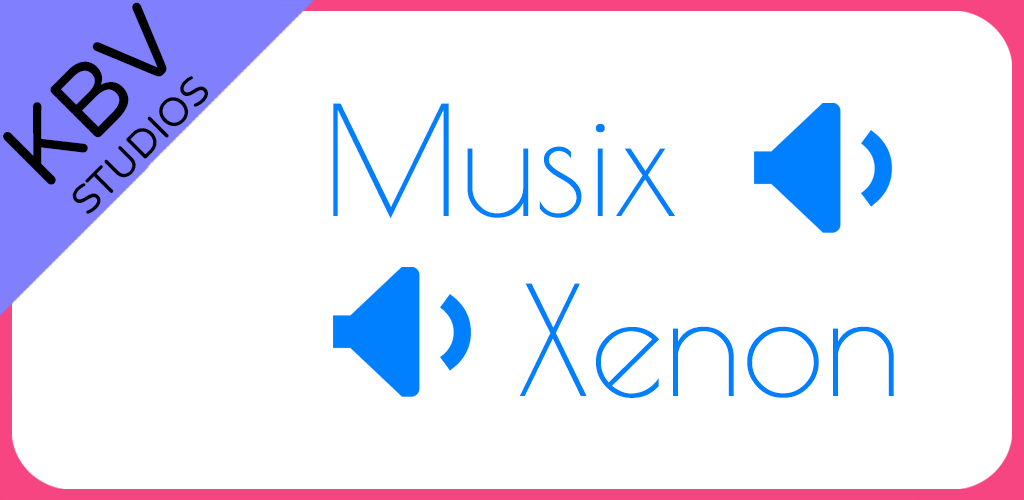
<style>
.page{position:relative;width:1024px;height:500px;background:#ffffff}
.page>*{position:absolute;margin:0}
.t1{font:40px "VarelaRound";color:#000000}
.t2{font:100px "VarelaRound";color:#000000}
.t3{font:150px "PoiretOne-Regular";color:#0080ff}
</style>
<div class="page">
<p class="t1" style="left:3px;top:2px;width:205px;height:212px;text-align:center;rotate:-45deg"><span class="t2">KBV<br></span>STUDIOS</p>
<p class="t3" style="left:333px;top:103px;width:561px;height:295px;text-align:center">Musix<br>        Xenon</p>
</div>
